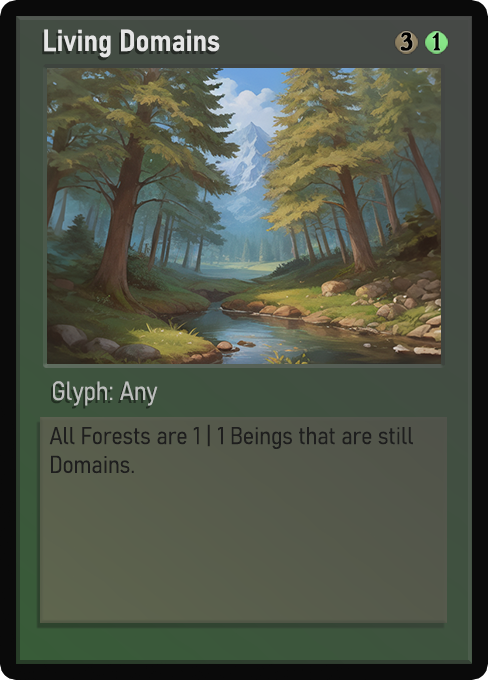
<style>
.page{position:relative;width:488px;height:680px}
.page>*{position:absolute;margin:0}
.t1{font:30px "Bahnschrift-SemiBoldSemiCondensed";color:#f2f2f2;font-weight:bold}
.t2{font:25px "WTRRoycroft";color:#000000;font-weight:bold;scale:1.09 1}
.t3{font:26px "Bahnschrift-LightSemiCondensed";color:#c8c8c8;font-weight:bold}
.t4{font:24px "Bahnschrift-LightSemiCondensed";color:#1e1e1e;font-weight:bold}
</style>
<div class="page">
<p class="t1" style="left:44px;top:29px;width:176px;height:29px;opacity:0.9">Living Domains</p>
<p class="t2" style="left:400px;top:32px;width:13px;height:19px">3</p>
<p class="t2" style="left:432px;top:32px;width:9px;height:19px">1</p>
<p class="t3" style="left:53px;top:381px;width:105px;height:25px;opacity:0.9">Glyph: Any</p>
<p class="t4" style="left:49px;top:424px;width:364px;height:50px">All Forests are 1 | 1 Beings that are still Domains.</p>
</div>
